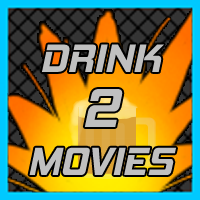
<style>
.page{position:relative;width:200px;height:200px}
.page>*{position:absolute;margin:0}
.t1{font:40px "HemiHeadRg-BoldItalic";color:#c0c0c0}
.t2{font:36px "HemiHeadRg-BoldItalic";color:#a3a3a3}
.t3{font:56px "HemiHeadRg-BoldItalic";color:#c0c0c0}
</style>
<div class="page">
<p class="t1" style="left:42px;top:44px;width:122px;height:28px">DRINK</p>
<p class="t1" style="left:29px;top:89px;width:147px;height:86px;text-align:center"><span class="t2"><br></span><span class="t3">2<br></span>MOVIES</p>
</div>
